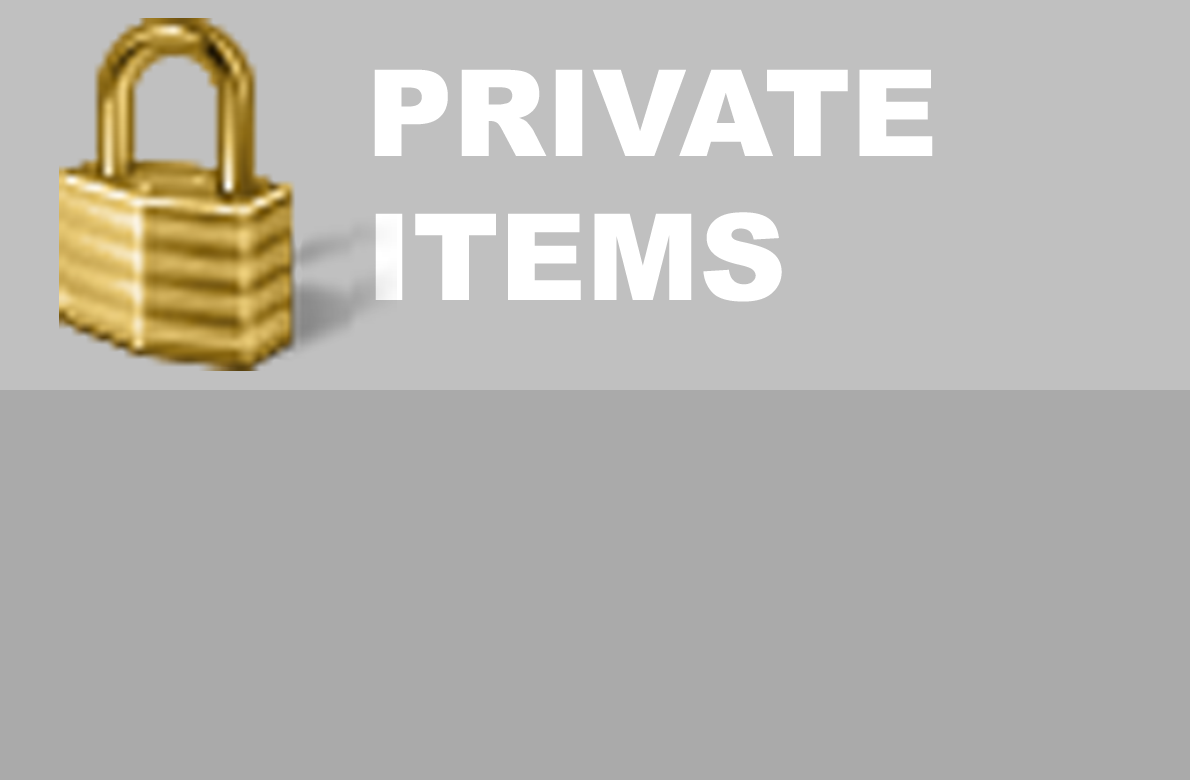
<style>
.page{position:relative;width:1190px;height:780px;background:#aaaaaa}
.page>*{position:absolute;margin:0}
.t1{font:120px "Arial-Black";color:#ffffff}
</style>
<div class="page">
<p class="t1" style="left:374px;top:69px;width:559px;height:233px">PRIVATE<br>ITEMS</p>
</div>
